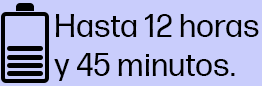
<style>
.page{position:relative;width:262px;height:86px;background:#c9cdfc}
.page>*{position:absolute;margin:0}
.t1{font:32px "FormaDJRMicro-Regular";color:#000000}
</style>
<div class="page">
<p class="t1" style="left:54px;top:14px;width:205px;height:67px">Hasta 12 horas y 45 minutos.</p>
</div>
